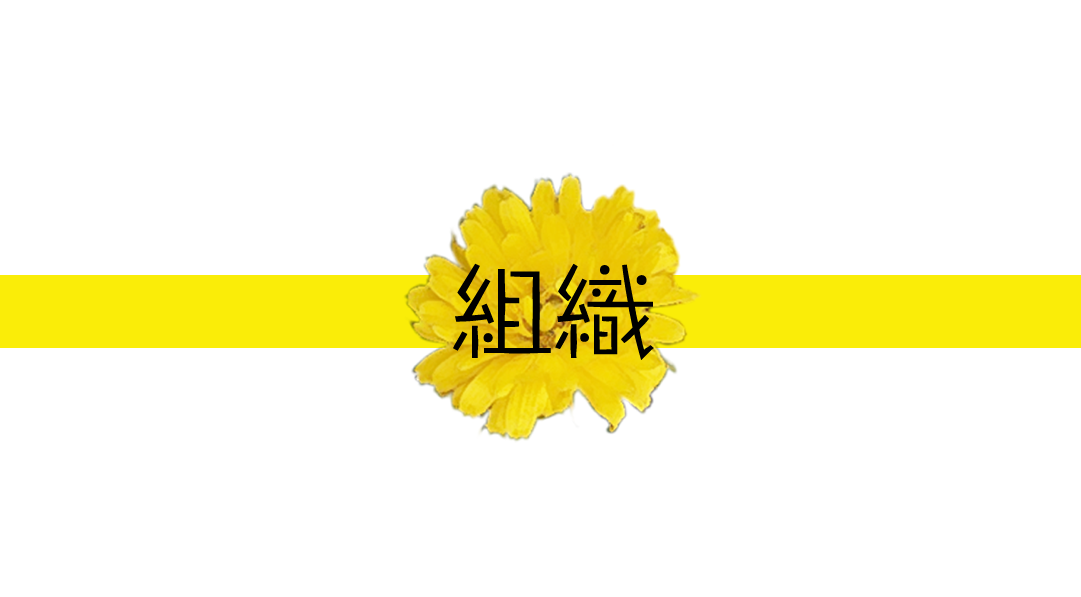
<style>
.page{position:relative;width:1081px;height:597px;background:#ffffff}
.page>*{position:absolute;margin:0}
.t1{font:103.1px "FZZHYFW--GB1-0";color:#000000}
</style>
<div class="page">
<p class="t1" style="left:453px;top:263px;width:201px;height:97px">组织</p>
</div>
